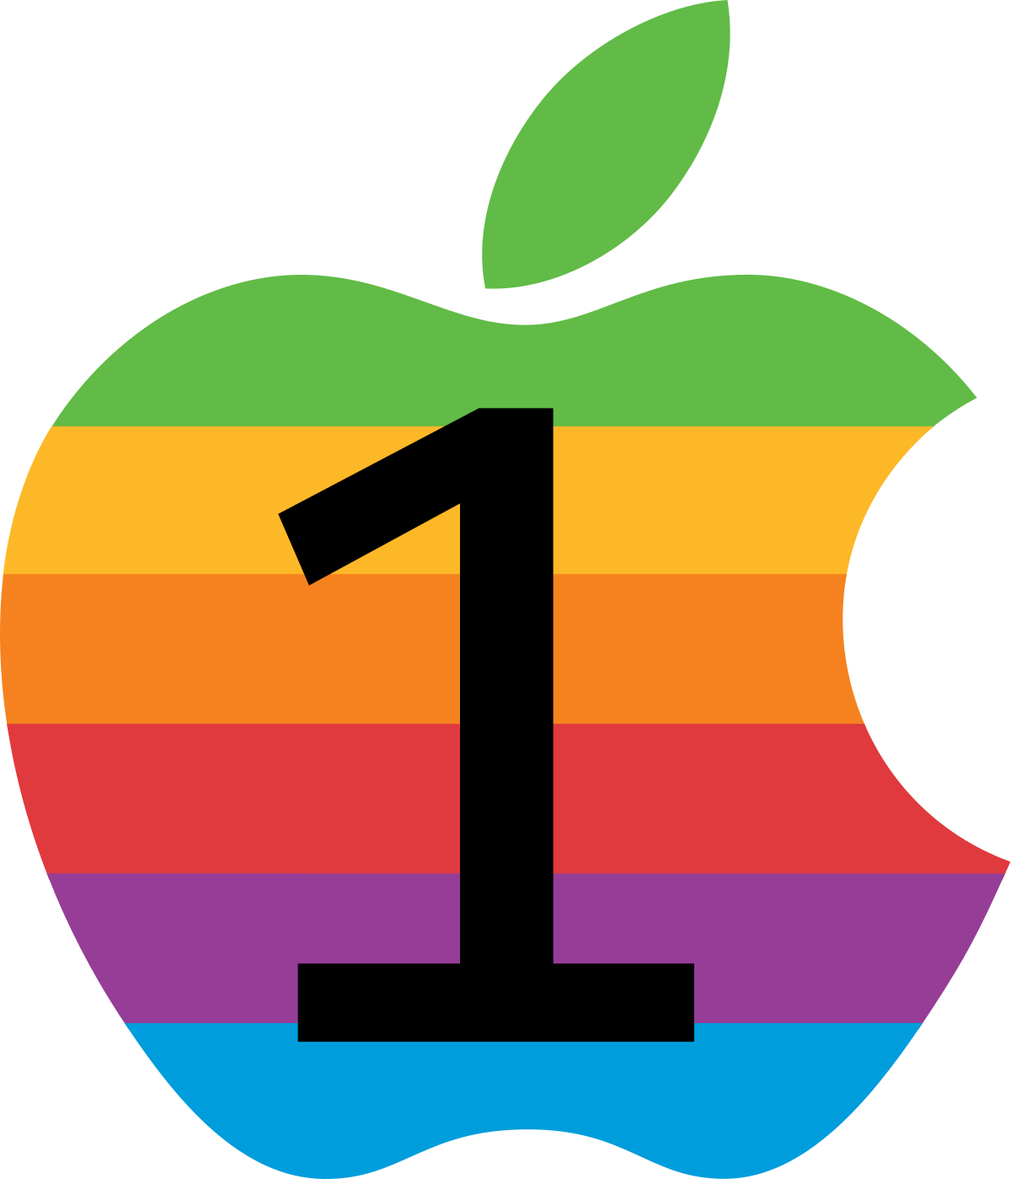
<style>
.page{position:relative;width:1011px;height:1179px;background:#ffffff}
.page>*{position:absolute;margin:0}
.t1{font:988.1px "Consolas";letter-spacing:0.2em;color:#000000}
</style>
<div class="page">
<p class="t1" style="left:278px;top:408px;width:416px;height:635px">1</p>
</div>
